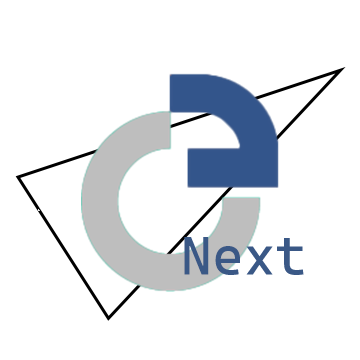
<style>
.page{position:relative;width:360px;height:360px;background:#ffffff}
.page>*{position:absolute;margin:0}
.t1{font:54px "CascadiaCode-Roman";color:#3a5886}
</style>
<div class="page">
<p class="t1" style="left:184px;top:237px;width:120px;height:38px">Next</p>
</div>
